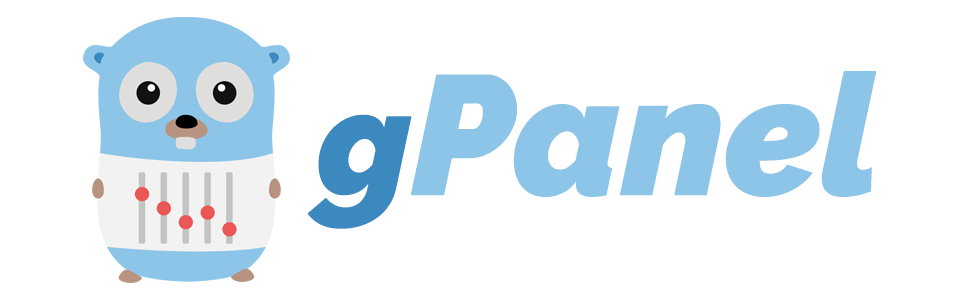
<style>
.page{position:relative;width:960px;height:300px;background:#ffffff}
.page>*{position:absolute;margin:0}
.t1{font:170px "Raleway-BlackItalic";color:#8cc5e7}
.t2{font:150px "Raleway-BlackItalic";color:#3c89bf}
</style>
<div class="page">
<p class="t1" style="left:307px;top:71px;width:570px;height:158px"><span class="t2">g</span>Panel</p>
</div>
